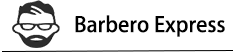
<style>
.page{position:relative;width:236px;height:54px;background:#ffffff}
.page>*{position:absolute;margin:0}
.t1{font:20.8px "AdobeHeitiStd-Regular";color:#000000}
</style>
<div class="page">
<p class="t1" style="left:75px;top:15px;width:150px;height:22px">Barbero Express</p>
</div>
